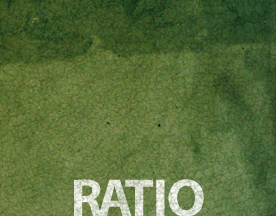
<style>
.page{position:relative;width:276px;height:216px}
.page>*{position:absolute;margin:0}
.t1{font:54px "MyriadPro-Bold"}
</style>
<div class="page">
<p class="t1" style="left:74px;top:179px;width:130px;height:38px">RATIO</p>
</div>
